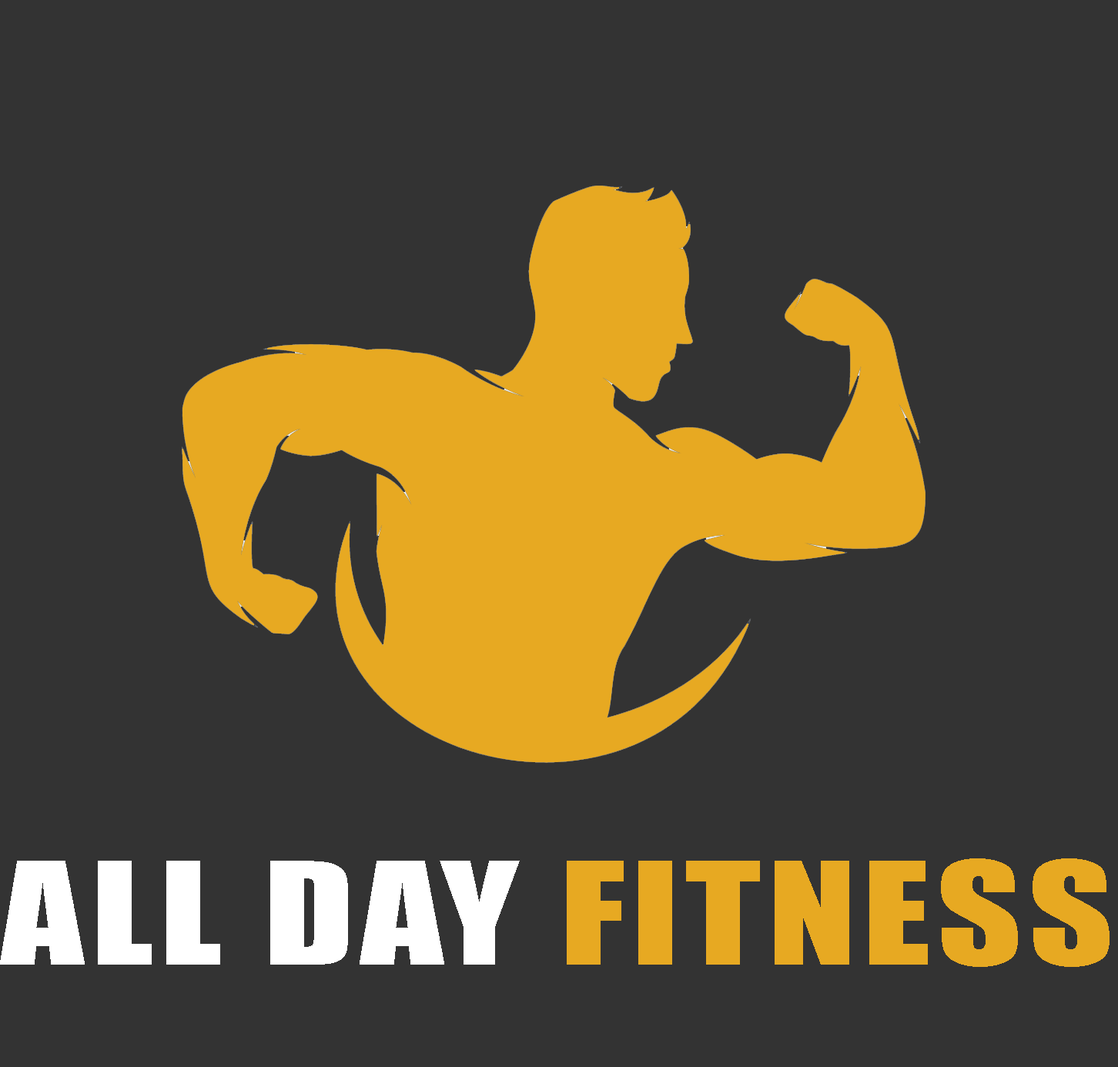
<style>
.page{position:relative;width:1118px;height:1067px;background:#333333}
.page>*{position:absolute;margin:0}
.t1{font:131.9px "Impact";letter-spacing:0.04em;color:#ffffff;scale:1.24 1}
.t2{font:131.9px "Impact";letter-spacing:0.04em;color:#e7a922;scale:1.24 1}
</style>
<div class="page">
<p class="t1" style="left:0px;top:858px;width:1109px;height:109px">ALL DAY <span class="t2">FITNESS</span></p>
</div>
